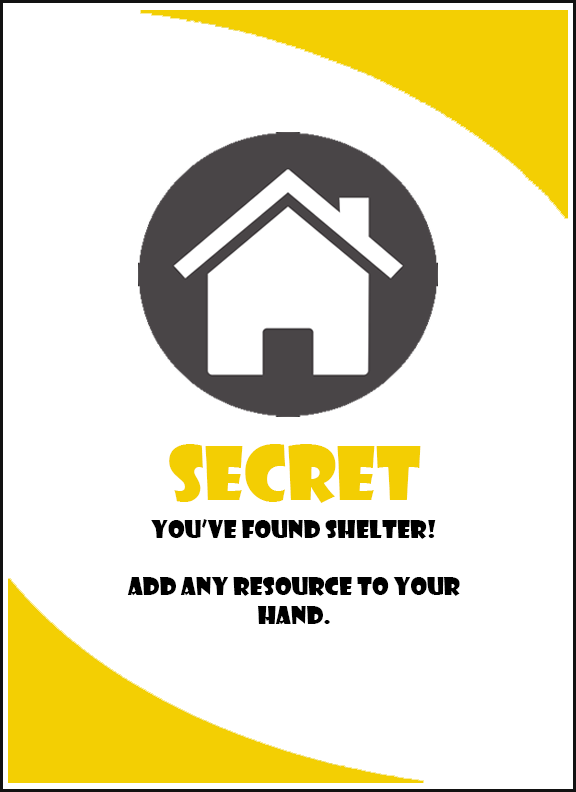
<style>
.page{position:relative;width:576px;height:792px;background:#ffffff}
.page>*{position:absolute;margin:0}
.t1{font:72px "ShowcardGothic-Reg";color:#f3ce03}
.t2{font:24px "ShowcardGothic-Reg";color:#000000}
</style>
<div class="page">
<p class="t1" style="left:169px;top:444px;width:252px;height:59px">SECRET</p>
<p class="t2" style="left:127px;top:519px;width:333px;height:106px;text-align:center">You’ve found shelter!<br><br>Add any resource to your hand.</p>
</div>
